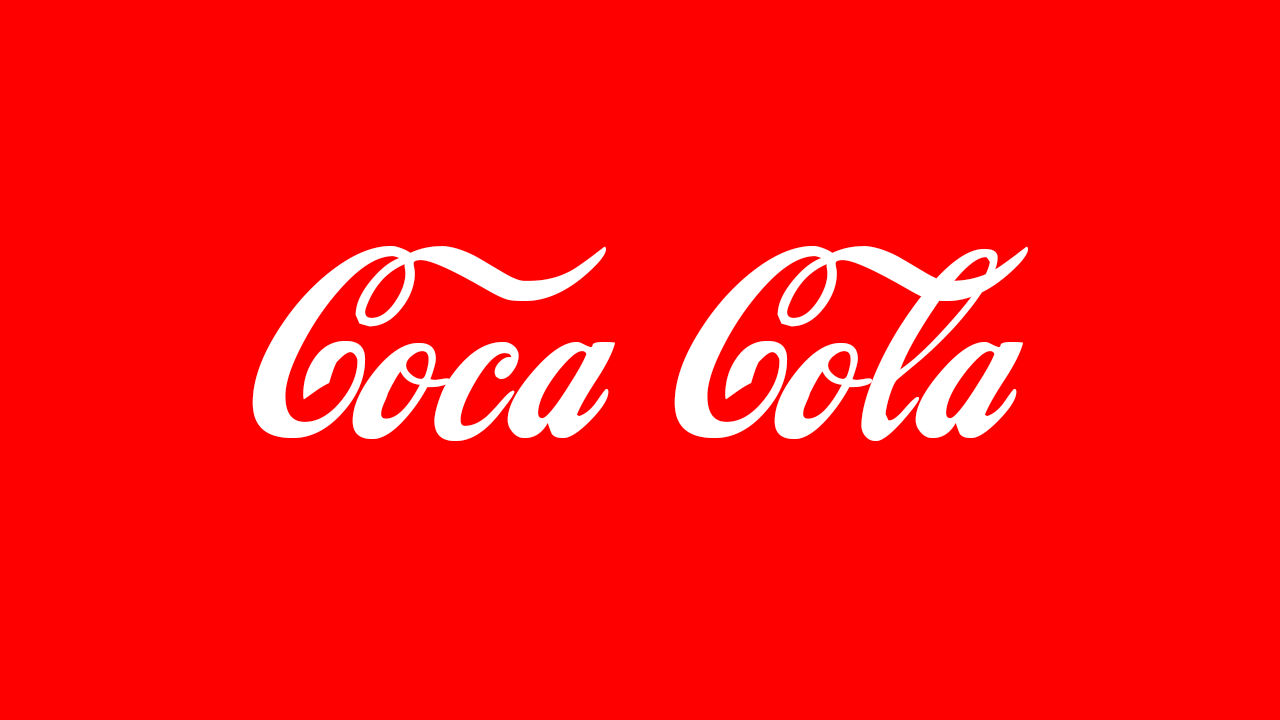
<style>
.page{position:relative;width:1280px;height:720px;background:#ff0000}
.page>*{position:absolute;margin:0}
.t1{font:250px "LokiCola";color:#ffffff}
</style>
<div class="page">
<p class="t1" style="left:252px;top:245px;width:776px;height:196px">Coca Cola</p>
</div>
